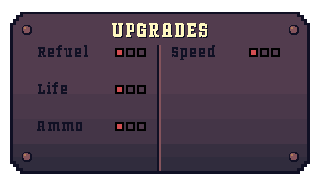
<style>
.page{position:relative;width:320px;height:180px;background:#523c4e}
.page>*{position:absolute;margin:0}
.t1{font:20.8px "Kegger";letter-spacing:0.06em;color:#fff8c0}
.t2{font:16px "Kegger";letter-spacing:0.06em;color:#101024}
</style>
<div class="page">
<p class="t1" style="left:112px;top:23px;width:95px;height:14px">UPGRADES</p>
<p class="t2" style="left:38px;top:45px;width:50px;height:12px">Refuel</p>
<p class="t2" style="left:172px;top:45px;width:43px;height:15px">Speed</p>
<p class="t2" style="left:38px;top:82px;width:29px;height:12px">Life</p>
<p class="t2" style="left:37px;top:121px;width:45px;height:10px">Ammo</p>
</div>
